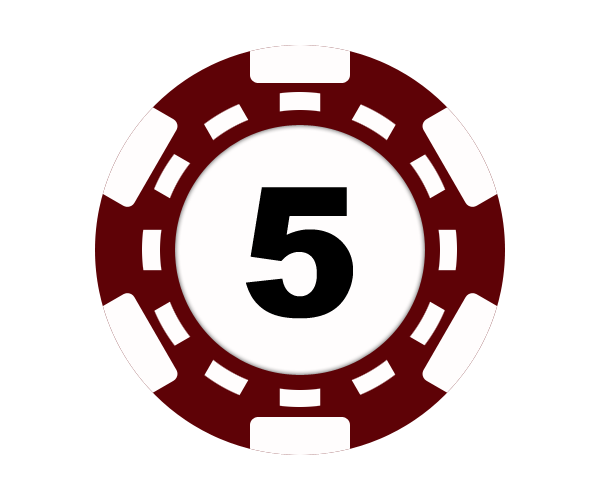
<style>
.page{position:relative;width:600px;height:500px;background:#ffffff}
.page>*{position:absolute;margin:0}
.t1{font:180px "Arial-Black";color:#000000}
</style>
<div class="page">
<p class="t1" style="left:246px;top:187px;width:107px;height:132px">5</p>
</div>
